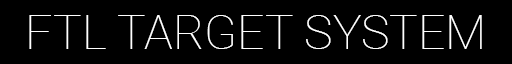
<style>
.page{position:relative;width:512px;height:64px;background:#000000}
.page>*{position:absolute;margin:0}
.t1{font:48px "Roboto-Thin";color:#ffffff;text-transform:uppercase}
</style>
<div class="page">
<p class="t1" style="left:29px;top:15px;width:453px;height:34px">FTL Target System</p>
</div>
